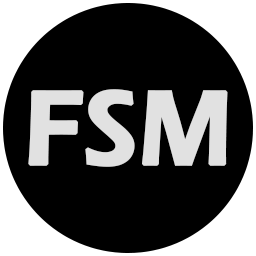
<style>
.page{position:relative;width:256px;height:256px;background:#000000}
.page>*{position:absolute;margin:0}
.t1{font:108.2px "ErasITC-Demi";letter-spacing:-0.02em;color:#e1e1e1;font-weight:bold}
</style>
<div class="page">
<p class="t1" style="left:28px;top:89px;width:200px;height:78px">FSM</p>
</div>
